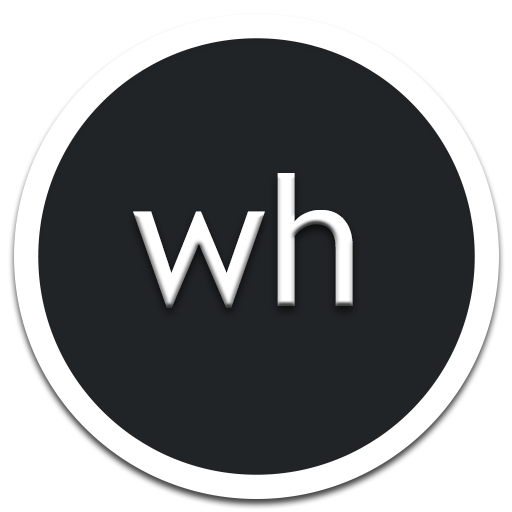
<style>
.page{position:relative;width:512px;height:512px;background:#212427}
.page>*{position:absolute;margin:0}
.t1{font:180px "TrebuchetMS";color:#ffffff}
</style>
<div class="page">
<p class="t1" style="left:133px;top:173px;width:220px;height:135px">wh</p>
</div>
